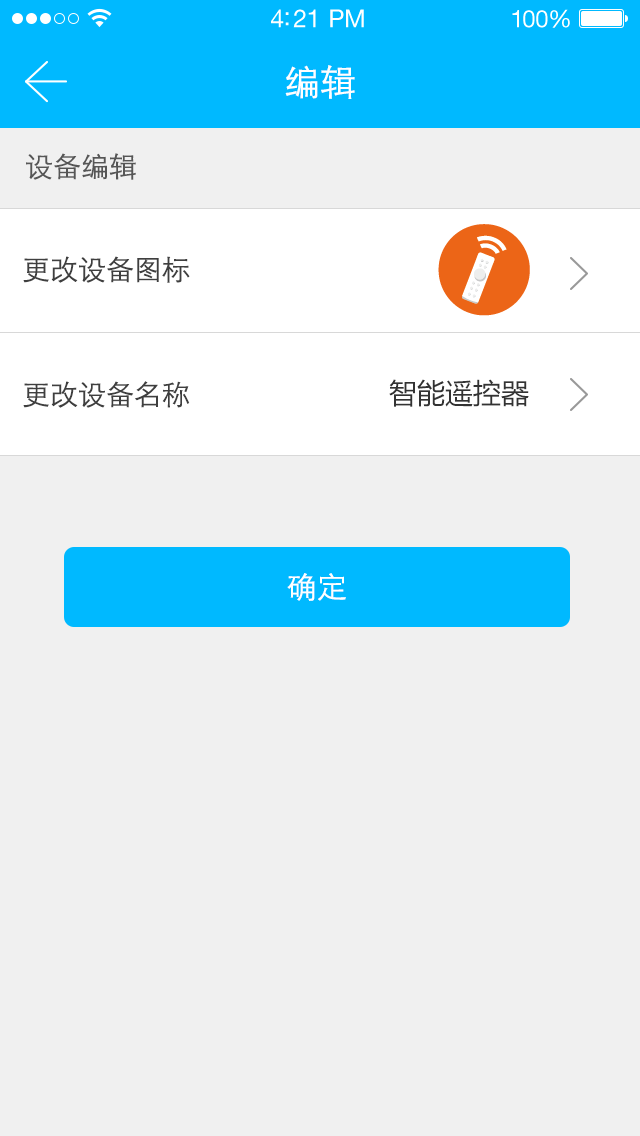
<style>
.page{position:relative;width:640px;height:1136px;background:#f0f0f0}
.page>*{position:absolute;margin:0}
.t1{font:25px "HelveticaNeueLTStd-Roman";letter-spacing:-0.02em;color:#ffffff}
.t2{font:24px "HelveticaNeueLTStd-Roman";letter-spacing:-0.02em;color:#ffffff}
.t3{font:36px "STXihei";color:#ffffff;text-transform:uppercase}
.t4{font:28px "STXihei";color:#565656;text-transform:uppercase}
.t5{font:28px "STXihei";color:#3f3f3f;text-transform:uppercase}
.t6{font:28px "MicrosoftYaHei";color:#333333;text-transform:uppercase}
.t7{font:30px "STXihei";color:#ffffff;text-transform:uppercase}
</style>
<div class="page">
<p class="t1" style="left:271px;top:9px;width:93px;height:19px">4:21 PM</p>
<p class="t2" style="left:512px;top:9px;width:58px;height:19px">100%</p>
<p class="t3" style="left:285px;top:65px;width:70px;height:34px">编辑</p>
<p class="t4" style="left:26px;top:153px;width:110px;height:27px">设备编辑</p>
<p class="t5" style="left:23px;top:256px;width:167px;height:27px">更改设备图标</p>
<p class="t5" style="left:23px;top:381px;width:167px;height:27px">更改设备名称</p>
<p class="t6" style="left:389px;top:379px;width:140px;height:28px">智能遥控器</p>
<p class="t7" style="left:287px;top:573px;width:59px;height:28px">确定</p>
</div>
